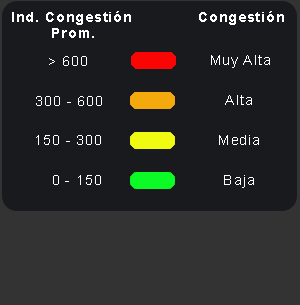
<style>
.page{position:relative;width:300px;height:305px;background:#181a1d}
.page>*{position:absolute;margin:0}
.t1{font:14px/16px "Arial-BoldMT";letter-spacing:0.075em;color:#ffffff}
.t2{font:14px "Arial-BoldMT";letter-spacing:0.075em;color:#ffffff}
.t3{font:14px "ArialMT";letter-spacing:0.075em;color:#fffefe}
.t4{font:14px "ArialMT";letter-spacing:0.075em;color:#ffffff}
</style>
<div class="page">
<p class="t1" style="left:12px;top:11px;width:119px;height:27px;text-align:center">Ind. Congestión <br>Prom.</p>
<p class="t2" style="left:199px;top:11px;width:85px;height:14px">Congestión</p>
<p class="t3" style="left:49px;top:56px;width:38px;height:10px">&gt; 600</p>
<p class="t4" style="left:211px;top:55px;width:59px;height:13px">Muy Alta</p>
<p class="t3" style="left:36px;top:96px;width:66px;height:10px">300 - 600</p>
<p class="t4" style="left:225px;top:95px;width:27px;height:10px">Alta</p>
<p class="t3" style="left:36px;top:135px;width:65px;height:10px">150 - 300</p>
<p class="t4" style="left:219px;top:135px;width:40px;height:10px">Media</p>
<p class="t3" style="left:53px;top:175px;width:48px;height:10px">0 - 150</p>
<p class="t4" style="left:224px;top:175px;width:30px;height:13px">Baja</p>
</div>
